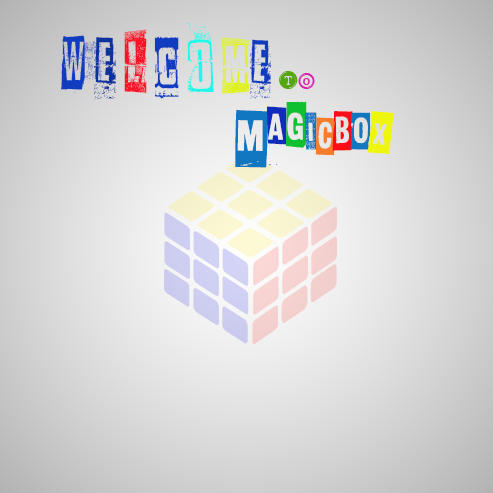
<style>
.page{position:relative;width:493px;height:493px}
.page>*{position:absolute;margin:0}
.t1{font:76.5px "Somethingintheway";color:#103dc0}
.t2{font:69.5px "Somethingintheway";color:#0c329e}
.t3{font:79.9px "Somethingintheway";color:#f81329}
.t4{font:69.5px "Somethingintheway";color:#103dc0}
.t5{font:76.5px "Somethingintheway";color:#1ef7ea}
.t6{font:69.5px "Somethingintheway";color:#dff20d}
.t7{font:66px "Somethingintheway";color:#103dc0}
.t8{font:24.3px "TypeKeysFilled";color:#54a60a}
.t9{font:20.9px "TypeKeys";color:#d621ae}
.t10{font:83.4px "Slaveonlydreamstobeking";color:#1077c0}
.t11{font:69.5px "Slaveonlydreamstobeking";color:#102cbd}
.t12{font:69.5px "Slaveonlydreamstobeking";color:#10c031}
.t13{font:69.5px "Slaveonlydreamstobeking";color:#1077c0}
.t14{font:69.5px "Slaveonlydreamstobeking";color:#f67d2c}
.t15{font:69.5px "Slaveonlydreamstobeking";color:#ff0c17}
.t16{font:69.5px "Slaveonlydreamstobeking";color:#eef60d}
</style>
<div class="page">
<p class="t1" style="left:61px;top:20px;width:254px;height:80px">W <span class="t2">E </span><span class="t3">L </span><span class="t4">C </span><span class="t5">O </span><span class="t6">M</span><span class="t7">E </span><span class="t8">T</span><span class="t9">O</span></p>
<p class="t10" style="left:235px;top:101px;width:159px;height:67px">M<span class="t11">A</span><span class="t12">G</span><span class="t13">I</span><span class="t14">C</span><span class="t15">B</span><span class="t13">O</span><span class="t16">X</span></p>
</div>
